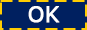
<style>
.page{position:relative;width:87px;height:30px;background:#002060}
.page>*{position:absolute;margin:0}
.t1{font:21px "Verdana";color:#ffffff;font-weight:bold}
</style>
<div class="page">
<p class="t1" style="left:28px;top:6px;width:32px;height:17px">OK</p>
</div>
